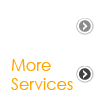
<style>
.page{position:relative;width:105px;height:99px;background:#ffffff}
.page>*{position:absolute;margin:0}
.t1{font:16px "CenturyGothic";color:#ffa500}
</style>
<div class="page">
<p class="t1" style="left:11px;top:59px;width:62px;height:31px">More<br>Services</p>
</div>
